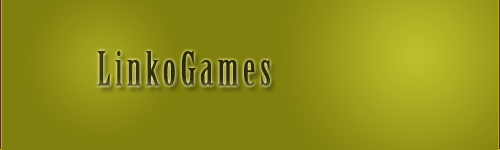
<style>
.page{position:relative;width:500px;height:150px;background:#817f0d}
.page>*{position:absolute;margin:0}
.t1{font:46px "BirchStd";letter-spacing:0.1em;color:#323207}
</style>
<div class="page">
<p class="t1" style="left:97px;top:51px;width:173px;height:35px">LinkoGames</p>
</div>
